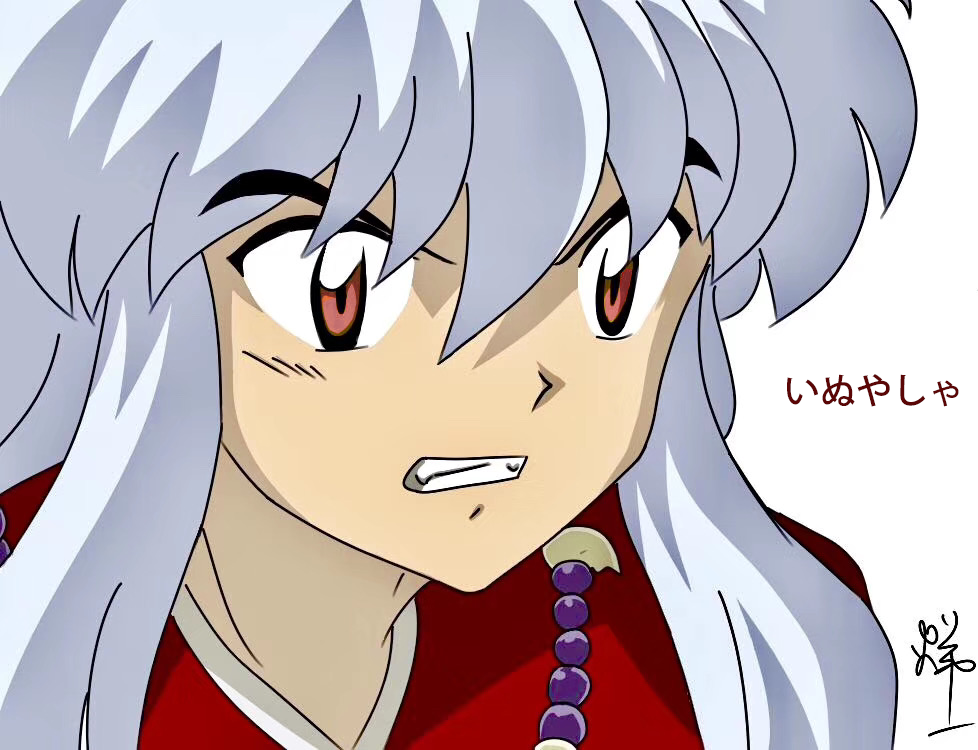
<style>
.page{position:relative;width:978px;height:750px}
.page>*{position:absolute;margin:0}
.t1{font:36px "AdobeHeitiStd-Regular";color:#5b0606}
</style>
<div class="page">
<p class="t1" style="left:787px;top:374px;width:172px;height:33px">いぬやしゃ<br><br>n</p>
</div>
